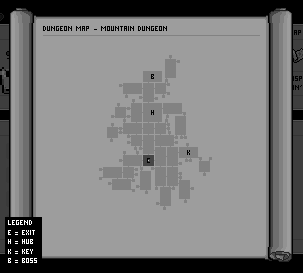
<style>
.page{position:relative;width:303px;height:273px;background:#9d9d9d}
.page>*{position:absolute;margin:0}
.t1{font:8px "PixelMillennium";color:#000000;text-transform:uppercase}
.t2{font:8px "PixelMillennium";color:#ffffff;text-transform:uppercase}
</style>
<div class="page">
<p class="t1" style="left:94px;top:26px;width:73px;height:5px">- mountain dungeon</p>
<p class="t2" style="left:8px;top:220px;width:29px;height:43px">legend<br>e = exit<br>h = hub<br>k = key<br>b = boss</p>
</div>
